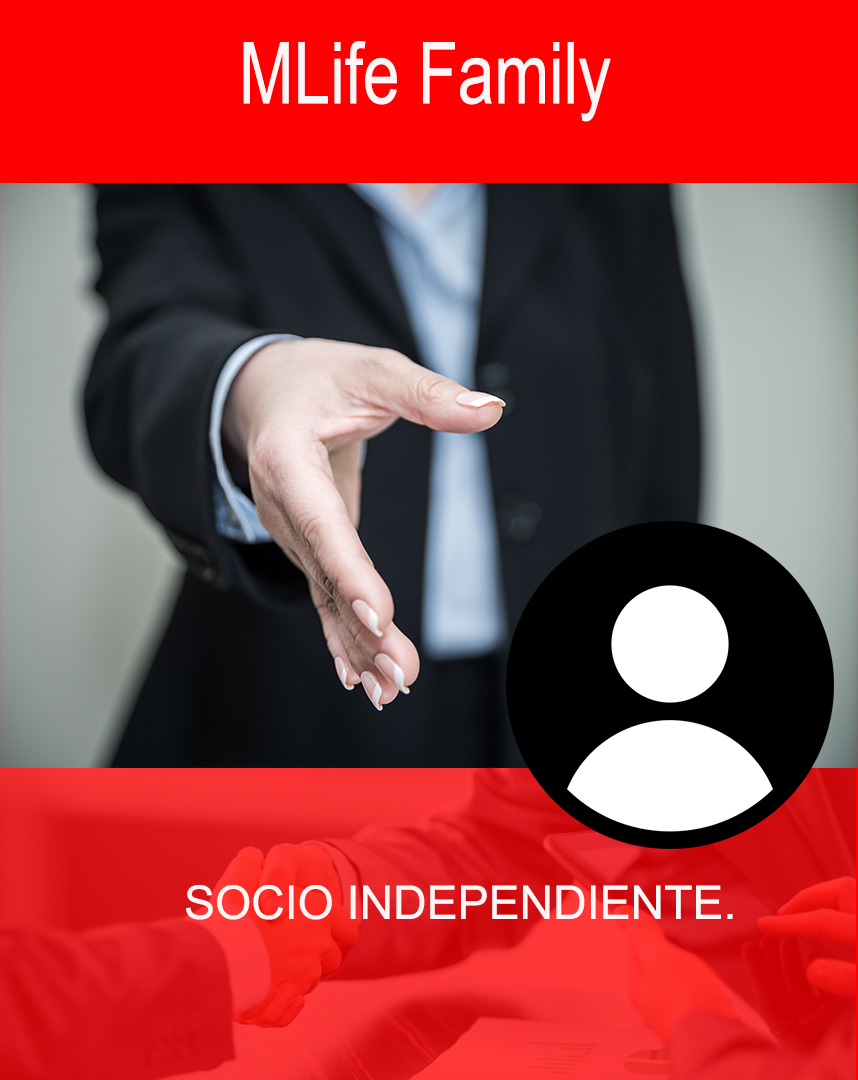
<style>
.page{position:relative;width:858px;height:1080px}
.page>*{position:absolute;margin:0}
.t1{font:85.4px "ArialMT";color:#fcf5f5;scale:0.77 1}
.t2{font:46.5px "ArialMT";color:#fcf5f5}
</style>
<div class="page">
<p class="t1" style="left:243px;top:41px;width:368px;height:81px">MLife Family</p>
<p class="t2" style="left:186px;top:885px;width:547px;height:35px">SOCIO INDEPENDIENTE.</p>
</div>
